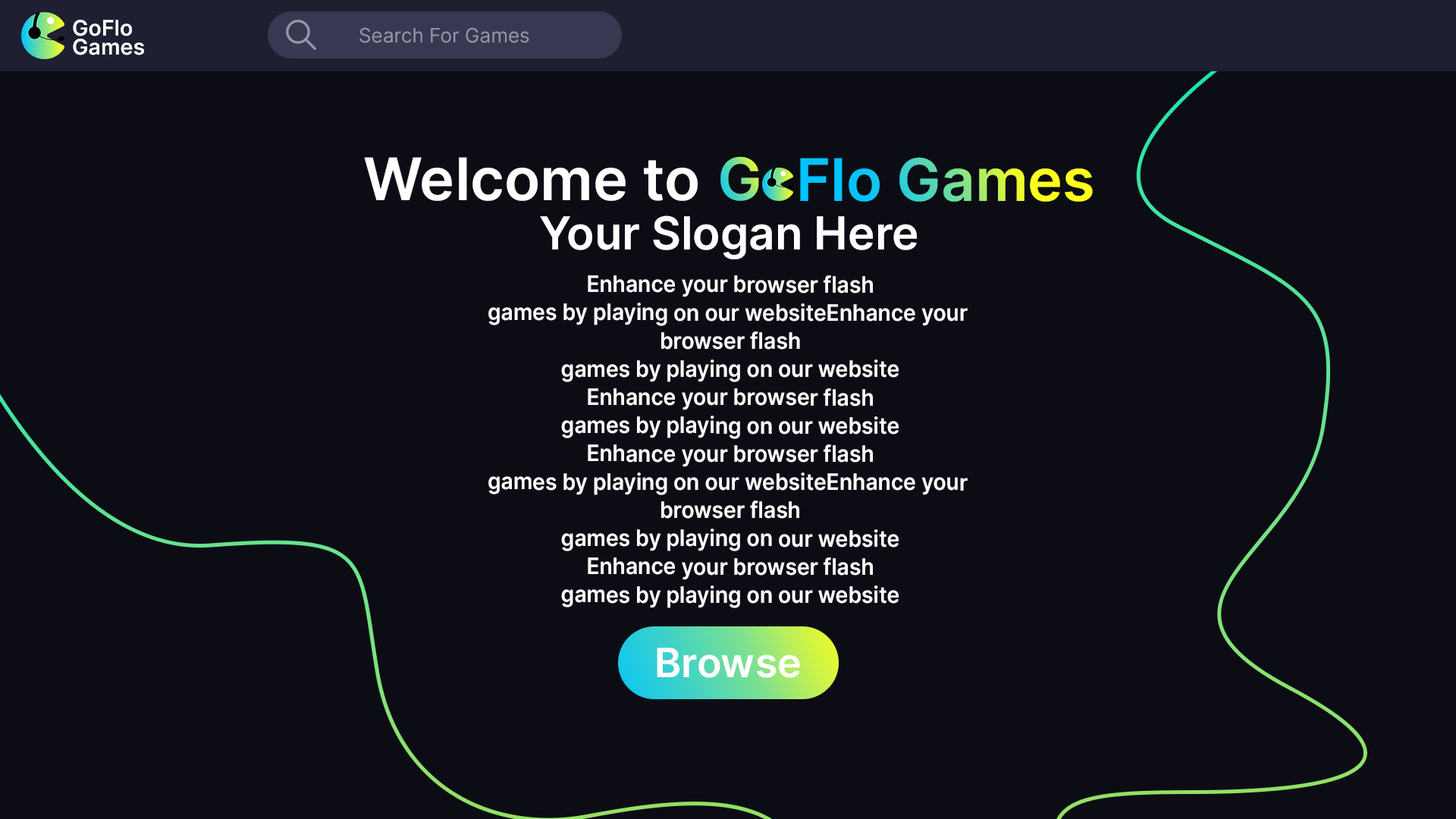
<style>
.page{position:relative;width:1456px;height:819px;background:#0c0d14}
.page>*{position:absolute;margin:0}
.t1{font:21.7px/19.1px "Inter-SemiBold";color:#fefeff}
.t2{font:19.9px "Inter-Regular";color:#9397a9}
.t3{font:58.8px "Inter-SemiBold";color:#ffffff}
.t4{font:58.8px "Inter-SemiBold"}
.t5{font:45.5px "Inter-SemiBold";color:#ffffff}
.t6{font:22.7px/28.2px "Inter-SemiBold";color:#ffffff;scale:0.94 1}
.t7{font:40.4px "Inter-SemiBold";color:#ffffff}
</style>
<div class="page">
<p class="t1" style="left:73px;top:20px;width:71px;height:35px">GoFlo<br>Games</p>
<p class="t2" style="left:359px;top:27px;width:170px;height:16px">Search For Games</p>
<p class="t3" style="left:364px;top:157px;width:334px;height:44px">Welcome to</p>
<p class="t4" style="left:720px;top:156px;width:39px;height:45px">G</p>
<p class="t4" style="left:800px;top:157px;width:293px;height:45px">Flo Games</p>
<p class="t5" style="left:540px;top:215px;width:377px;height:44px">Your Slogan Here</p>
<p class="t6" style="left:488px;top:275px;width:480px;height:333px;text-align:center">Enhance your browser flash<br>games by playing on our websiteEnhance your <br>browser flash<br>games by playing on our website<br>Enhance your browser flash<br>games by playing on our website<br>Enhance your browser flash<br>games by playing on our websiteEnhance your <br>browser flash<br>games by playing on our website<br>Enhance your browser flash<br>games by playing on our website</p>
<p class="t7" style="left:657px;top:648px;width:143px;height:30px">Browse</p>
</div>
